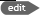
<style>
.page{position:relative;width:40px;height:16px;background:#646464}
.page>*{position:absolute;margin:0}
.t1{font:10px "TrebuchetMS";color:#ffffff}
</style>
<div class="page">
<p class="t1" style="left:8px;top:4px;width:18px;height:7px">edit</p>
</div>
